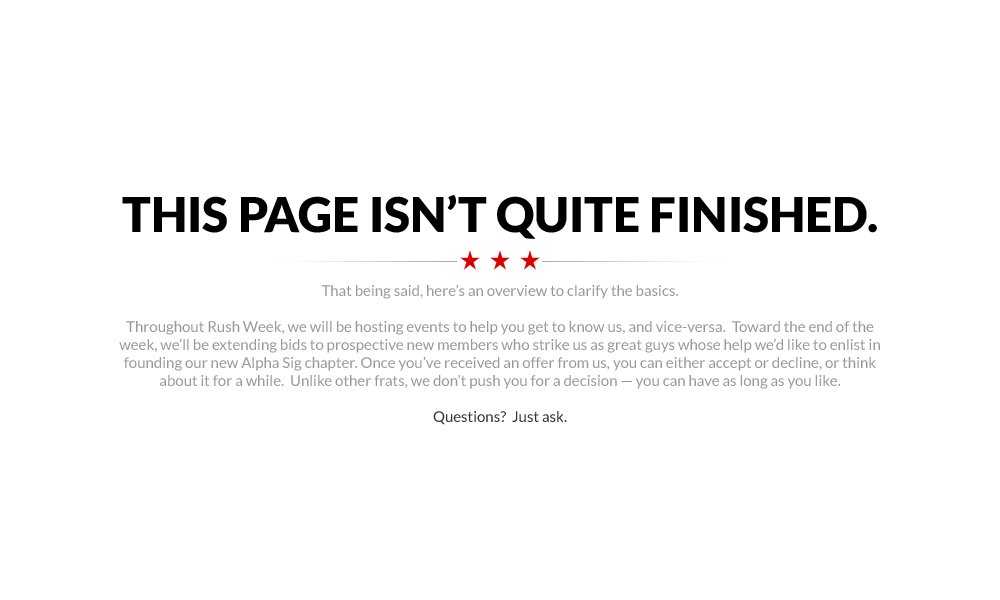
<style>
.page{position:relative;width:1000px;height:600px;background:#ffffff}
.page>*{position:absolute;margin:0}
.t1{font:15px/18px "Lato-Regular";color:#999999}
.t2{font:48px/36px "Lato-Black";color:#000000}
.t3{font:15px/18px "Lato-Regular";color:#333333}
</style>
<div class="page">
<p class="t1" style="left:119px;top:194px;width:761px;height:231px;text-align:center"><span class="t2">THIS PAGE ISN’T QUITE FINISHED.<br><br></span><br><br>That being said, here’s an overview to clarify the basics.<br><br>Throughout Rush Week, we will be hosting events to help you get to know us, and vice-versa.  Toward the end of the<br>week, we’ll be extending bids to prospective new members who strike us as great guys whose help we’d like to enlist in<br>founding our new Alpha Sig chapter. Once you’ve received an offer from us, you can either accept or decline, or think<br>about it for a while.  Unlike other frats, we don’t push you for a decision — you can have as long as you like.<br><br><span class="t3">Questions?  Just ask.</span></p>
</div>
